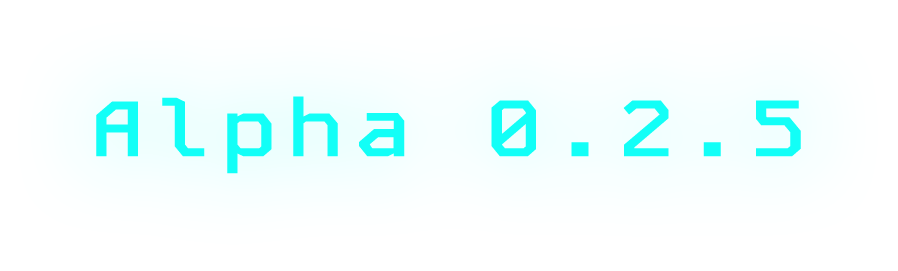
<style>
.page{position:relative;width:898px;height:271px;background:#ffffff}
.page>*{position:absolute;margin:0}
.t1{font:78px "KodeMono-SemiBold";letter-spacing:0.1em;color:#12fff7;scale:1.21 1}
</style>
<div class="page">
<p class="t1" style="left:96px;top:96px;width:705px;height:78px">Alpha 0.2.5</p>
<p class="t1" style="left:96px;top:96px;width:705px;height:78px">Alpha 0.2.5</p>
</div>
